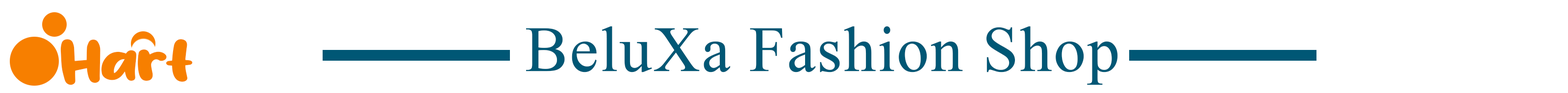
<style>
.page{position:relative;width:1568px;height:93px;background:#ffffff}
.page>*{position:absolute;margin:0}
.t1{font:64.1px "TimesNewRomanPSMT";color:#005775;font-weight:bold}
.t2{font:53.6px "Fresh-Fruit";letter-spacing:-0.075em;color:#f77f00;font-weight:bold;scale:1.27 1}
</style>
<div class="page">
<p class="t1" style="left:526px;top:26px;width:592px;height:59px">BeluXa Fashion Shop</p>
<p class="t2" style="left:60px;top:39px;width:133px;height:46px">Hart</p>
</div>
